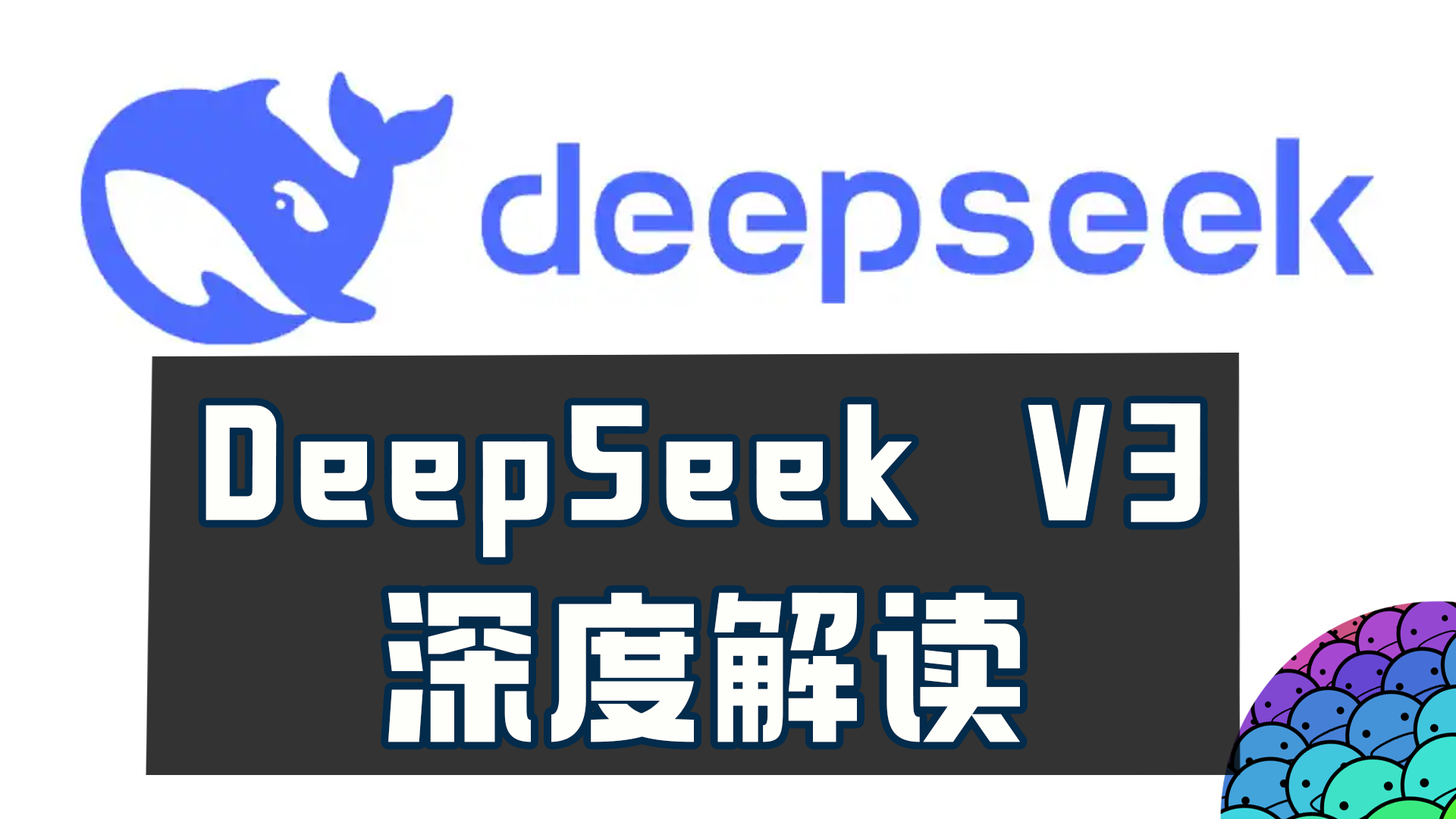
<style>
.page{position:relative;width:1456px;height:819px;background:#ffffff}
.page>*{position:absolute;margin:0}
.t1{font:166.8px/204.7px "098-";letter-spacing:0.05em;color:#fefffa}
</style>
<div class="page">
<p class="t1" style="left:206px;top:403px;width:994px;height:339px;text-align:center">DeepSeek V3<br>深度解读</p>
</div>
